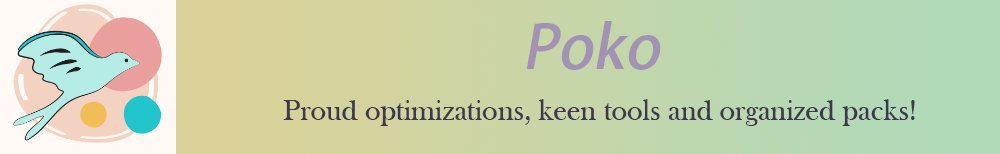
<style>
.page{position:relative;width:1000px;height:154px}
.page>*{position:absolute;margin:0}
.t1{font:60px "AdobeHeitiStd-Regular";color:#a292b3;font-style:italic}
.t2{font:30px "BaskOldFace";color:#3d384c}
</style>
<div class="page">
<p class="t1" style="left:526px;top:21px;width:135px;height:49px">Poko</p>
<p class="t2" style="left:283px;top:99px;width:632px;height:27px">Proud optimizations, keen tools and organized packs!</p>
</div>
